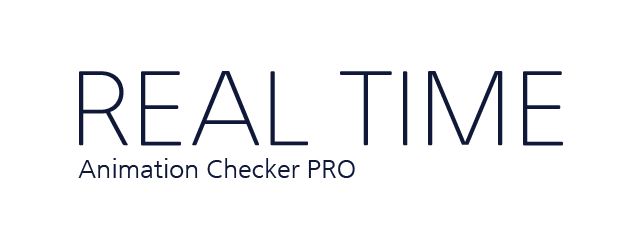
<style>
.page{position:relative;width:640px;height:240px;background:#ffffff}
.page>*{position:absolute;margin:0}
.t1{font:100px "NanumGothicLight";color:#0f1839}
.t2{font:25px "NanumGothic";color:#0f1839}
</style>
<div class="page">
<p class="t1" style="left:79px;top:71px;width:484px;height:75px">REAL TIME</p>
<p class="t2" style="left:78px;top:158px;width:277px;height:20px">Animation Checker PRO</p>
</div>
